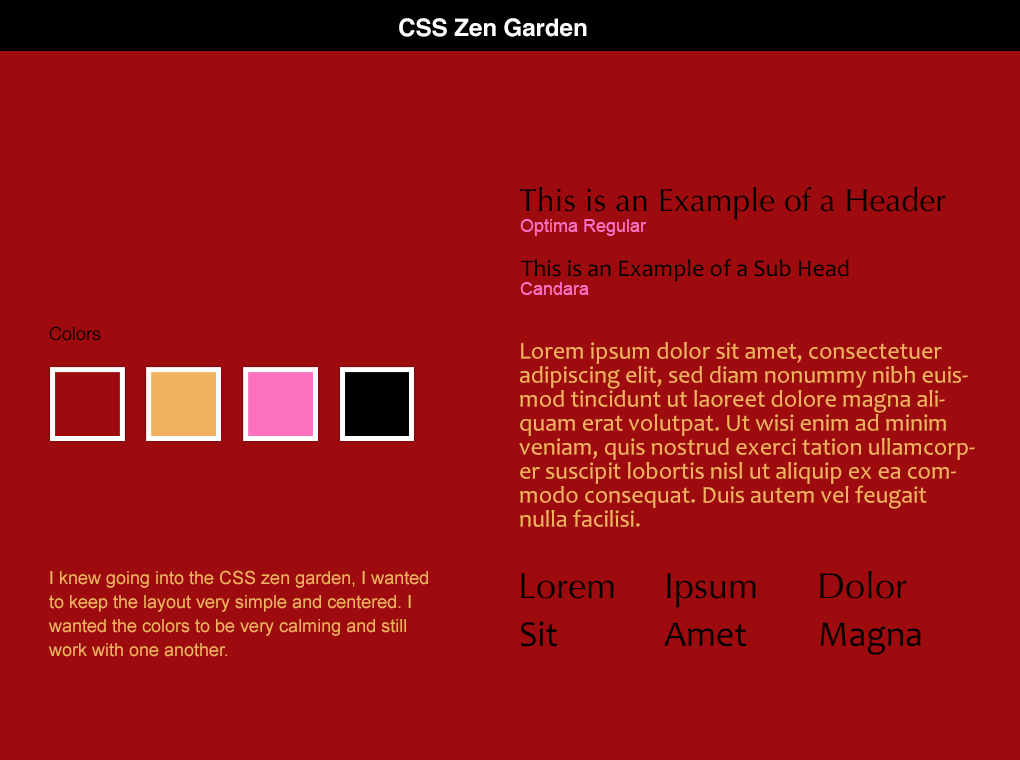
<style>
.page{position:relative;width:1020px;height:760px;background:#9e0b0f}
.page>*{position:absolute;margin:0}
.t1{font:24px "Helvetica-Bold";color:#ffffff}
.t2{font:32px "Optima-Regular";color:#000000}
.t3{font:18px "ArialMT";color:#fb70bf}
.t4{font:24px "Candara";color:#000000}
.t5{font:18px "Helvetica";color:#000000}
.t6{font:24px/24px "Candara";color:#f1b260}
.t7{font:18px/24px "ArialMT";color:#f1b260}
.t8{font:36px "Optima-Regular";color:#000000}
.t9{font:36px "Candara";color:#000000}
</style>
<div class="page">
<p class="t1" style="left:399px;top:18px;width:188px;height:19px">CSS Zen Garden</p>
<p class="t2" style="left:519px;top:186px;width:427px;height:34px">This is an Example of a Header</p>
<p class="t3" style="left:520px;top:219px;width:127px;height:17px">Optima Regular</p>
<p class="t4" style="left:521px;top:259px;width:328px;height:23px">This is an Example of a Sub Head</p>
<p class="t3" style="left:520px;top:282px;width:69px;height:13px">Candara</p>
<p class="t5" style="left:49px;top:326px;width:52px;height:15px">Colors</p>
<p class="t6" style="left:519px;top:342px;width:456px;height:185px">Lorem ipsum dolor sit amet, consectetuer adipiscing elit, sed diam nonummy nibh euismod tincidunt ut laoreet dolore magna aliquam erat volutpat. Ut wisi enim ad minim veniam, quis nostrud exerci tation ullamcorper suscipit lobortis nisl ut aliquip ex ea commodo consequat. Duis autem vel feugait nulla facilisi.</p>
<p class="t7" style="left:49px;top:570px;width:379px;height:87px">I knew going into the CSS zen garden, I wanted to keep the layout very simple and centered. I wanted the colors to be very calming and still work with one another.</p>
<p class="t8" style="left:521px;top:573px;width:93px;height:26px">Lorem</p>
<p class="t8" style="left:667px;top:573px;width:89px;height:35px">Ipsum</p>
<p class="t8" style="left:820px;top:571px;width:87px;height:28px">Dolor</p>
<p class="t9" style="left:520px;top:621px;width:38px;height:26px">Sit</p>
<p class="t9" style="left:664px;top:622px;width:83px;height:25px">Amet</p>
<p class="t9" style="left:820px;top:622px;width:101px;height:33px">Magna</p>
</div>
